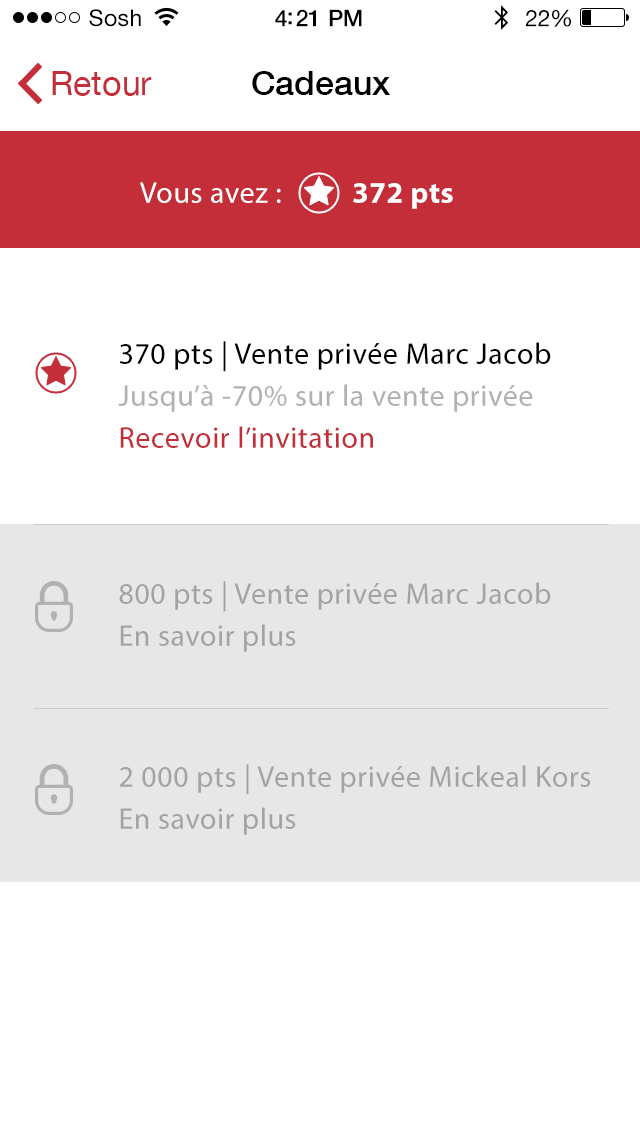
<style>
.page{position:relative;width:640px;height:1139px;background:#ffffff}
.page>*{position:absolute;margin:0}
.t1{font:23px "HelveticaNeue";letter-spacing:0.02em;color:#000000}
.t2{font:23px "HelveticaNeue-Medium";letter-spacing:-0.02em;color:#000000}
.t3{font:23px "HelveticaNeue";letter-spacing:-0.02em;color:#000000}
.t4{font:34.1px "HelveticaNeue";color:#c32e39}
.t5{font:34.1px "HelveticaNeue-Medium";color:#000000}
.t6{font:30px "MyriadPro-Regular";letter-spacing:0.02em;color:#ffffff}
.t7{font:30px "MyriadPro-Bold";letter-spacing:0.02em;color:#ffffff}
.t8{font:30px/42px "MyriadPro-Regular";letter-spacing:0.02em;color:#000000}
.t9{font:30px/42px "MyriadPro-Regular";letter-spacing:0.02em;color:#b1b1b1}
.t10{font:30px/42px "MyriadPro-Regular";letter-spacing:0.02em;color:#c32e39}
.t11{font:30px/42px "MyriadPro-Regular";letter-spacing:0.02em;color:#a3a3a3}
</style>
<div class="page">
<p class="t1" style="left:89px;top:9px;width:52px;height:18px">Sosh</p>
<p class="t2" style="left:275px;top:9px;width:87px;height:18px">4:21 PM</p>
<p class="t3" style="left:525px;top:9px;width:46px;height:18px">22%</p>
<p class="t4" style="left:52px;top:71px;width:100px;height:25px">Retour</p>
<p class="t5" style="left:252px;top:71px;width:139px;height:24px">Cadeaux</p>
<p class="t6" style="left:140px;top:182px;width:313px;height:27px">Vous avez :          <span class="t7">372 pts</span></p>
<p class="t8" style="left:118px;top:341px;width:433px;height:107px">370 pts | Vente privée Marc Jacob<br><span class="t9">Jusqu’à -70% sur la vente privée</span><span class="t10"> <br>Recevoir l’invitation</span></p>
<p class="t11" style="left:119px;top:581px;width:432px;height:71px">800 pts | Vente privée Marc Jacob<br>En savoir plus</p>
<p class="t11" style="left:119px;top:764px;width:472px;height:71px">2 000 pts | Vente privée Mickeal Kors<br>En savoir plus</p>
</div>
